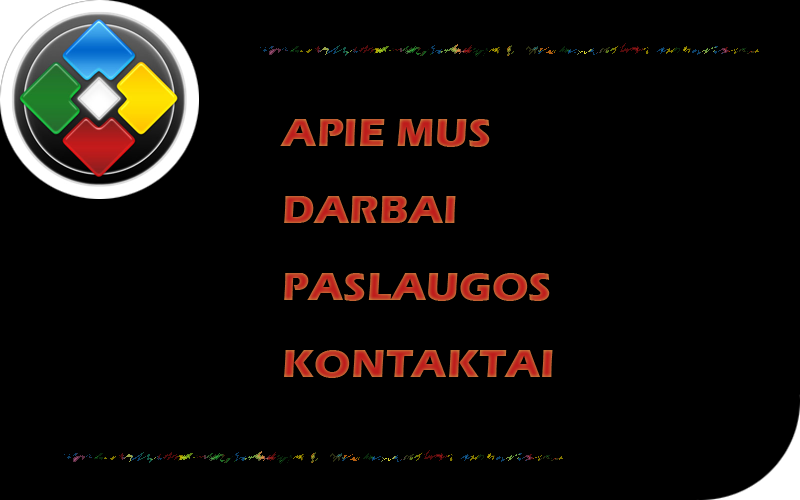
<style>
.page{position:relative;width:800px;height:500px;background:#000000}
.page>*{position:absolute;margin:0}
.t1{font:40px/77px "ErasITC-Bold";scale:1.06 1}
</style>
<div class="page">
<p class="t1" style="left:280px;top:119px;width:273px;height:259px">APIE MUS<br>DARBAI<br>PASLAUGOS<br>KONTAKTAI</p>
</div>
